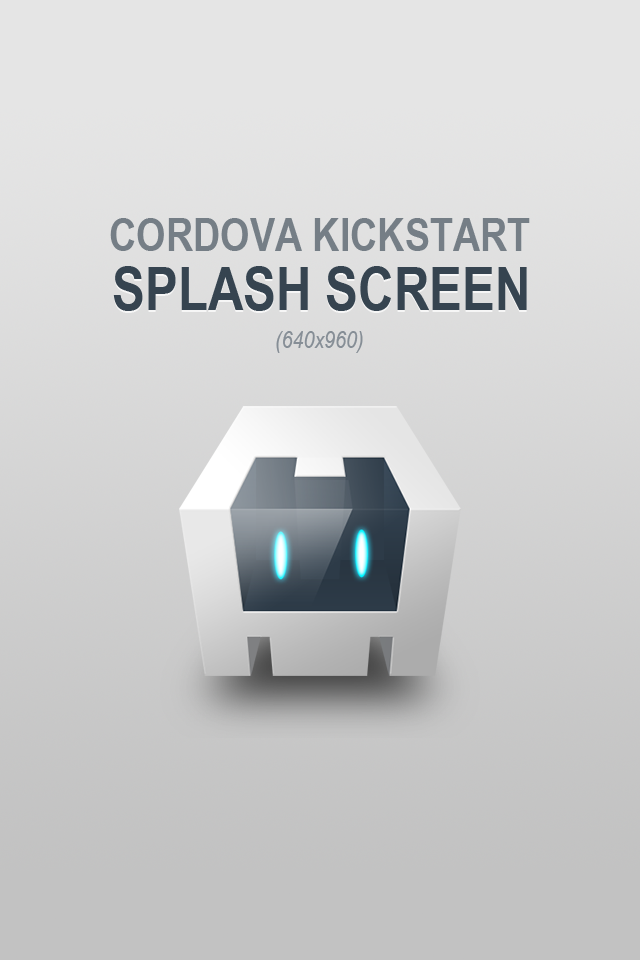
<style>
.page{position:relative;width:640px;height:960px}
.page>*{position:absolute;margin:0}
.t1{font:46px "ArialNarrow-Bold";color:#757e86;text-transform:uppercase}
.t2{font:60px "ArialNarrow-Bold";color:#364450;text-transform:uppercase}
.t3{font:24px "ArialNarrow-Italic";color:#868e96}
</style>
<div class="page">
<p class="t1" style="left:110px;top:218px;width:420px;height:33px">Cordova Kickstart</p>
<p class="t2" style="left:113px;top:266px;width:414px;height:45px">Splash Screen</p>
<p class="t3" style="left:276px;top:331px;width:87px;height:22px">(640x960)</p>
</div>
